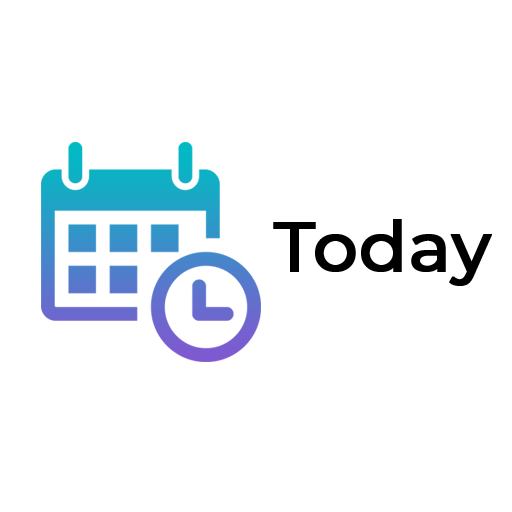
<style>
.page{position:relative;width:512px;height:512px;background:#ffffff}
.page>*{position:absolute;margin:0}
.t1{font:70px "Montserrat-Medium";color:#000000;font-weight:bold}
</style>
<div class="page">
<p class="t1" style="left:273px;top:219px;width:219px;height:67px">Today</p>
</div>
